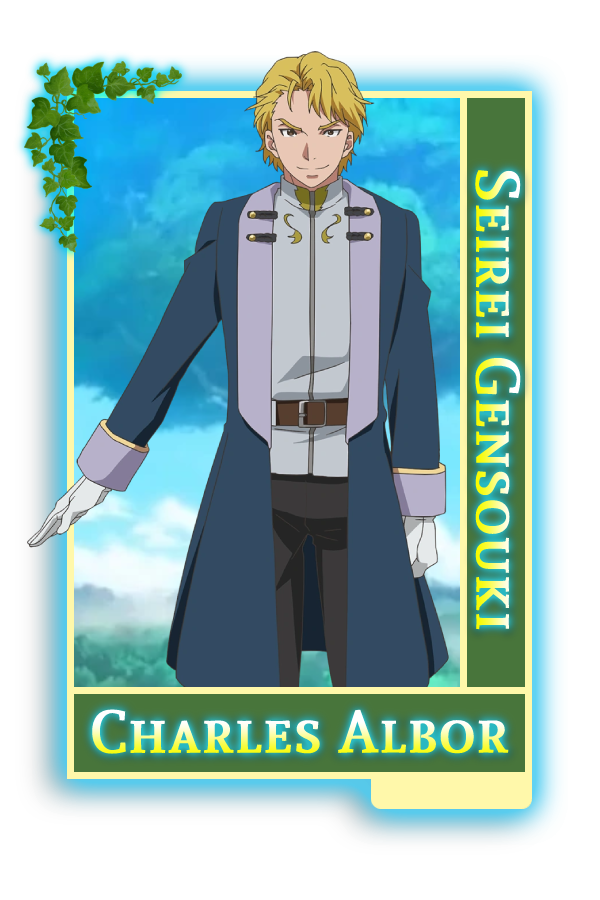
<style>
.page{position:relative;width:600px;height:900px;background:#ffffff}
.page>*{position:absolute;margin:0}
.t1{font:61px "AndadaSC-Regular";font-weight:bold}
.t2{font:60px "AndadaSC-Regular";font-weight:bold}
</style>
<div class="page">
<p class="t1" style="left:475px;top:170px;width:46px;height:460px;rotate:90deg">Seirei Gensouki</p>
<p class="t2" style="left:92px;top:709px;width:417px;height:45px">Charles Albor</p>
</div>
